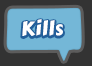
<style>
.page{position:relative;width:92px;height:66px;background:#333333}
.page>*{position:absolute;margin:0}
.t1{font:20px "CarterOne";letter-spacing:0.025em;color:#ffffff}
</style>
<div class="page">
<p class="t1" style="left:22px;top:19px;width:41px;height:17px">Kills</p>
</div>
